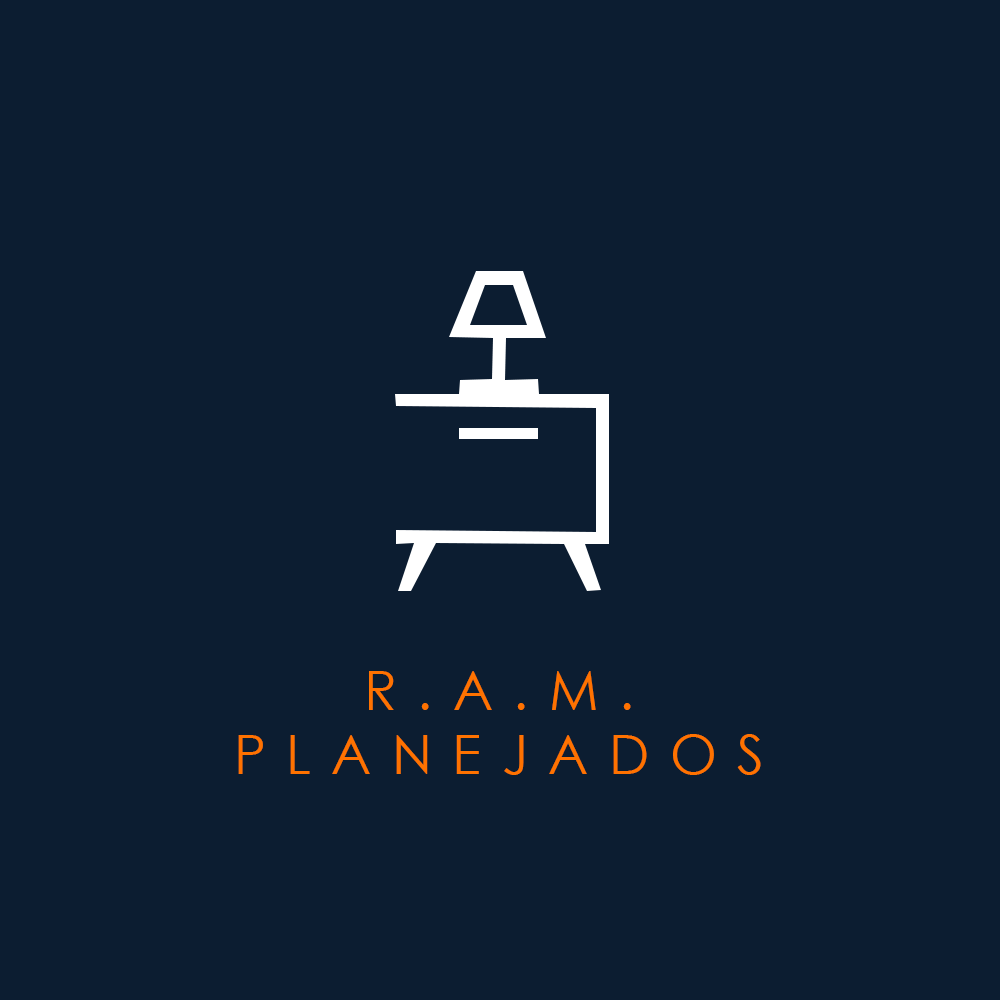
<style>
.page{position:relative;width:1000px;height:1000px;background:#0c1d31}
.page>*{position:absolute;margin:0}
.t1{font:54px "CenturyGothic";letter-spacing:0.38em;color:#ff7200}
</style>
<div class="page">
<p class="t1" style="left:238px;top:671px;width:523px;height:104px;text-align:center">R.A.M.<br>PLANEJADOS</p>
</div>
